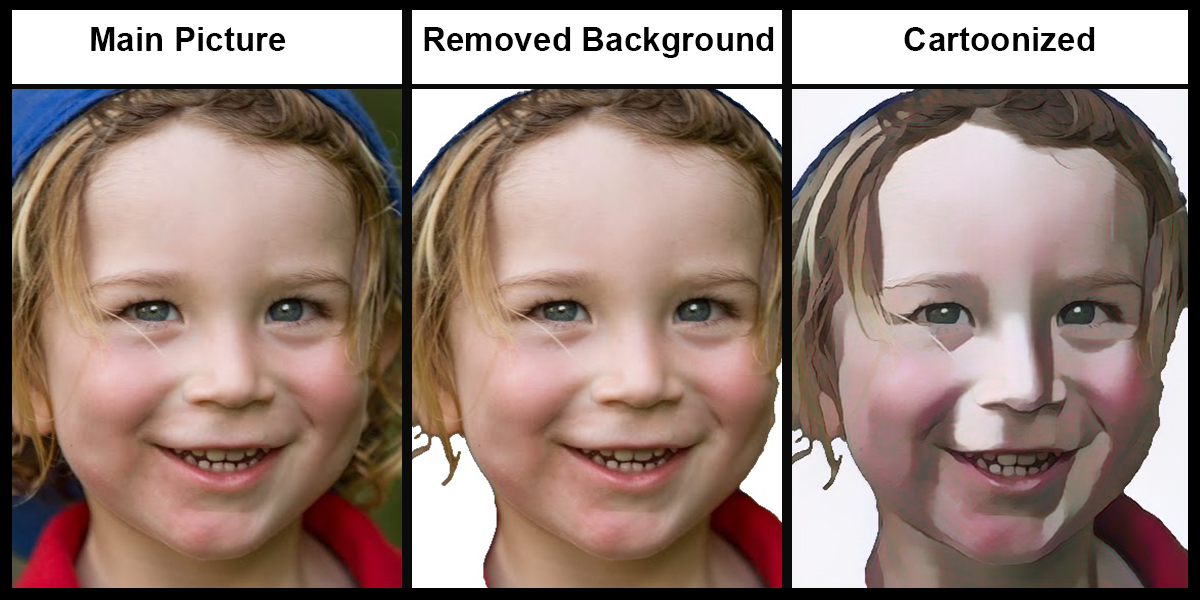
<style>
.page{position:relative;width:1200px;height:600px}
.page>*{position:absolute;margin:0}
.t1{font:33.3px "Arial-BoldMT";color:#000000}
</style>
<div class="page">
<p class="t1" style="left:91px;top:27px;width:195px;height:24px">Main Picture</p>
<p class="t1" style="left:424px;top:27px;width:350px;height:31px">Removed Background</p>
<p class="t1" style="left:904px;top:27px;width:191px;height:24px">Cartoonized</p>
</div>
